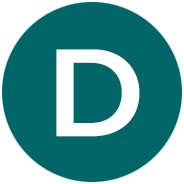
<style>
.page{position:relative;width:184px;height:184px;background:#006667}
.page>*{position:absolute;margin:0}
.t1{font:127px "GillSans-SemiBold";color:#ffffff}
</style>
<div class="page">
<p class="t1" style="left:56px;top:49px;width:84px;height:88px">D</p>
</div>
